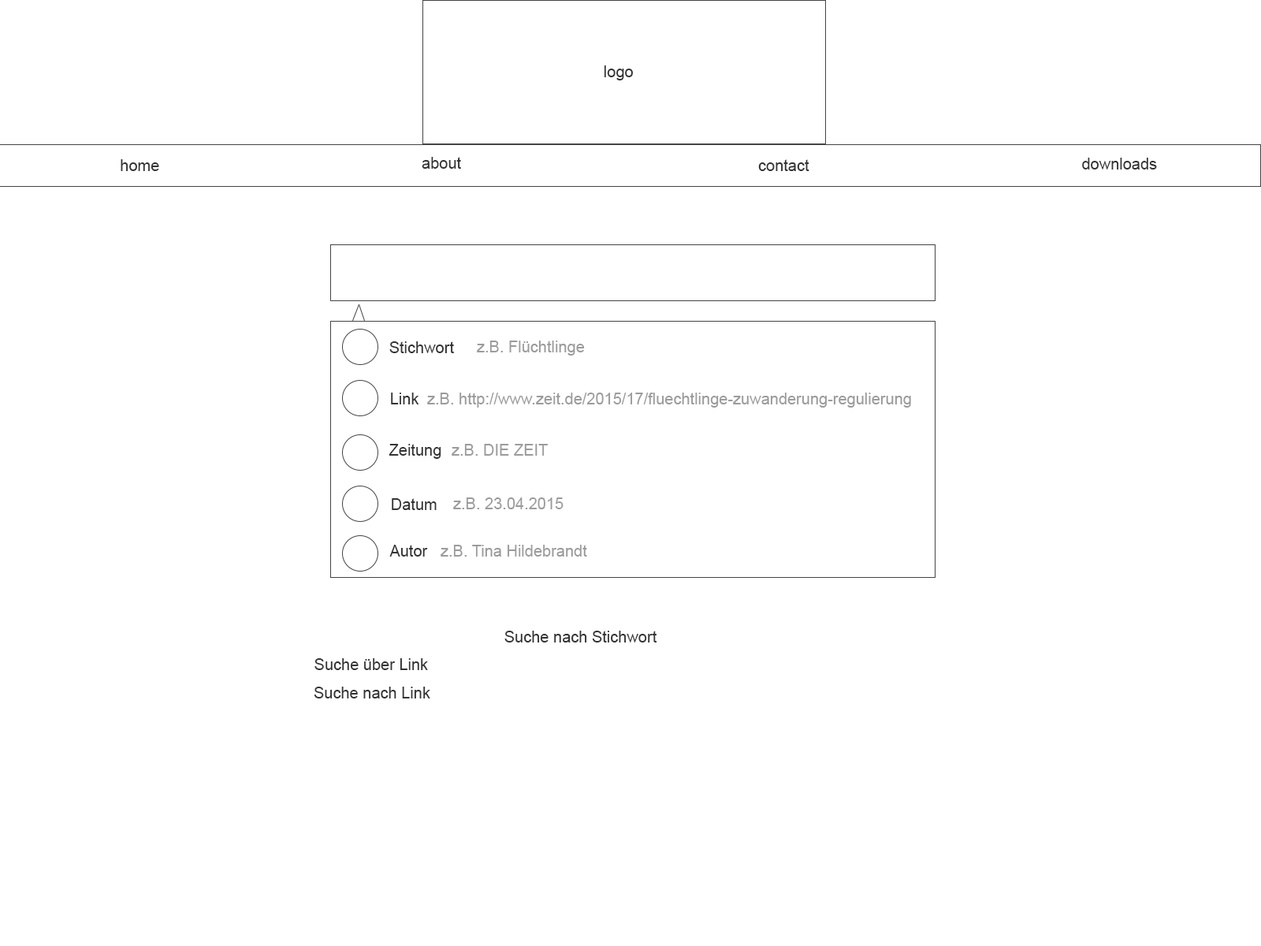
<style>
.page{position:relative;width:1261px;height:946px;background:#ffffff}
.page>*{position:absolute;margin:0}
.t1{font:15.8px "ArialMT";color:#343434}
.t2{font:15.8px "ArialMT";color:#9c9b9b}
</style>
<div class="page">
<p class="t1" style="left:604px;top:65px;width:29px;height:15px">logo</p>
<p class="t1" style="left:121px;top:159px;width:38px;height:12px">home</p>
<p class="t1" style="left:422px;top:157px;width:39px;height:12px">about</p>
<p class="t1" style="left:758px;top:159px;width:51px;height:12px">contact</p>
<p class="t1" style="left:1082px;top:158px;width:75px;height:11px">downloads</p>
<p class="t1" style="left:389px;top:341px;width:65px;height:12px">Stichwort</p>
<p class="t2" style="left:477px;top:340px;width:108px;height:15px">z.B. Flüchtlinge</p>
<p class="t1" style="left:391px;top:392px;width:28px;height:12px">Link</p>
<p class="t2" style="left:427px;top:392px;width:484px;height:15px">z.B. http://www.zeit.de/2015/17/fluechtlinge-zuwanderung-regulierung</p>
<p class="t1" style="left:389px;top:444px;width:52px;height:15px">Zeitung</p>
<p class="t2" style="left:452px;top:444px;width:96px;height:12px">z.B. DIE ZEIT</p>
<p class="t2" style="left:453px;top:497px;width:110px;height:12px">z.B. 23.04.2015</p>
<p class="t1" style="left:392px;top:498px;width:45px;height:12px">Datum</p>
<p class="t1" style="left:389px;top:545px;width:39px;height:11px">Autor</p>
<p class="t2" style="left:441px;top:545px;width:146px;height:11px">z.B. Tina Hildebrandt</p>
<p class="t1" style="left:504px;top:630px;width:153px;height:12px">Suche nach Stichwort</p>
<p class="t1" style="left:314px;top:658px;width:114px;height:12px">Suche über Link</p>
<p class="t1" style="left:314px;top:686px;width:116px;height:12px">Suche nach Link</p>
</div>
